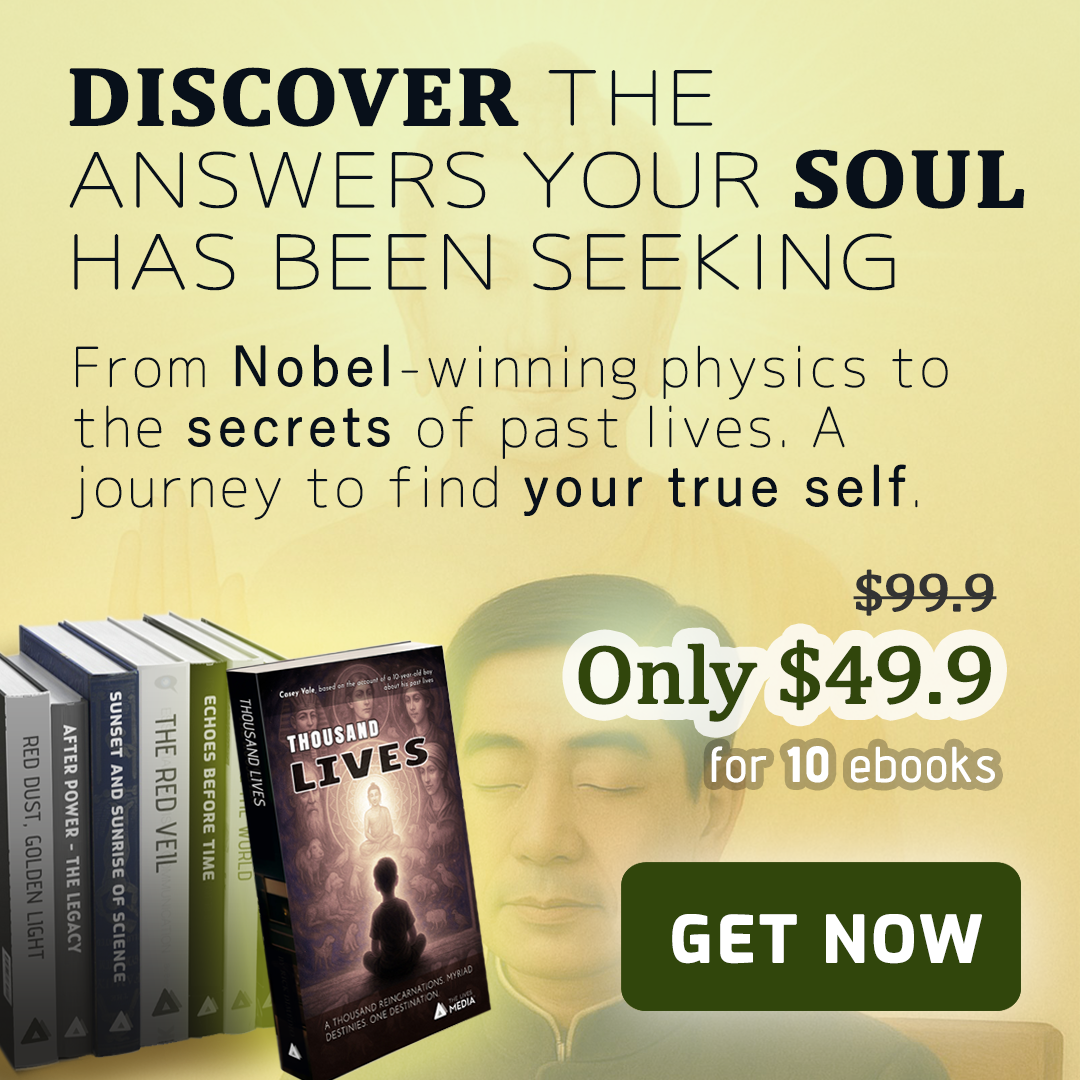
<style>
.page{position:relative;width:1080px;height:1080px}
.page>*{position:absolute;margin:0}
.t1{font:73.6px/82px "Chogokuboso-Gothic";letter-spacing:0.005em;color:#08101a;font-weight:bold;scale:1.25 1}
.t2{font:82.8px/82px "Cambria-Bold";letter-spacing:0.005em;color:#08101a;font-weight:bold;scale:1.11 1}
.t3{font:54px/60px "Chogokuboso-Gothic";letter-spacing:0.05em;color:#08101a;font-weight:bold}
.t4{font:54px/60px "YuGothic-Regular";letter-spacing:0.05em;color:#08101a;font-weight:bold}
.t5{font:54px "Cambria";letter-spacing:-0.025em;color:#333333;font-weight:bold;scale:1.11 1}
.t6{font:82.8px "Cambria";letter-spacing:-0.025em;color:#31460c;font-weight:bold;scale:1.11 1}
.t7{font:54px "Cambria";letter-spacing:-0.025em;color:#31460c;font-weight:bold;scale:1.11 1}
.t8{font:48px "AdventPro-Regular";letter-spacing:0.05em;color:#ffffff;font-weight:bold}
.t9{font:48px "AdventPro-Bold";letter-spacing:0.05em;color:#ffffff;font-weight:bold}
.t10{font:63px "Exo-Bold";letter-spacing:0.05em;color:#fefefe;font-weight:bold}
</style>
<div class="page">
<p class="t1" style="left:69px;top:67px;width:956px;height:224px"><span class="t2">DISCOVER </span>THE ANSWERS YOUR <span class="t2">SOUL </span>HAS BEEN SEEKING</p>
<p class="t3" style="left:71px;top:344px;width:877px;height:176px">From <span class="t4">Nobel</span>-winning physics to the <span class="t4">secrets </span>of past lives. A journey to find <span class="t4">your true self</span>.</p>
<p class="t5" style="left:853px;top:569px;width:144px;height:47px">$99.9</p>
<p class="t6" style="left:578px;top:639px;width:413px;height:83px"><span class="t7"><br></span>Only $49.9</p>
<p class="t8" style="left:711px;top:746px;width:284px;height:37px">for <span class="t9">10</span> ebooks</p>
<p class="t10" style="left:672px;top:914px;width:310px;height:50px">GET NOW</p>
</div>
